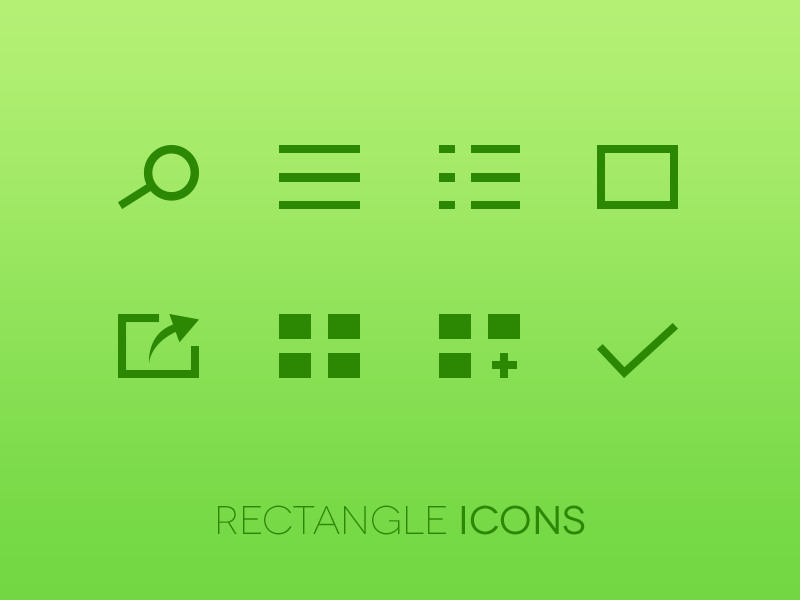
<style>
.page{position:relative;width:800px;height:600px}
.page>*{position:absolute;margin:0}
.t1{font:40px "Novecentowide-Light";color:#2c8702}
.t2{font:40px "Novecentowide-Normal";color:#2c8702}
</style>
<div class="page">
<p class="t1" style="left:218px;top:505px;width:367px;height:30px">Rectangle <span class="t2">Icons</span></p>
</div>
